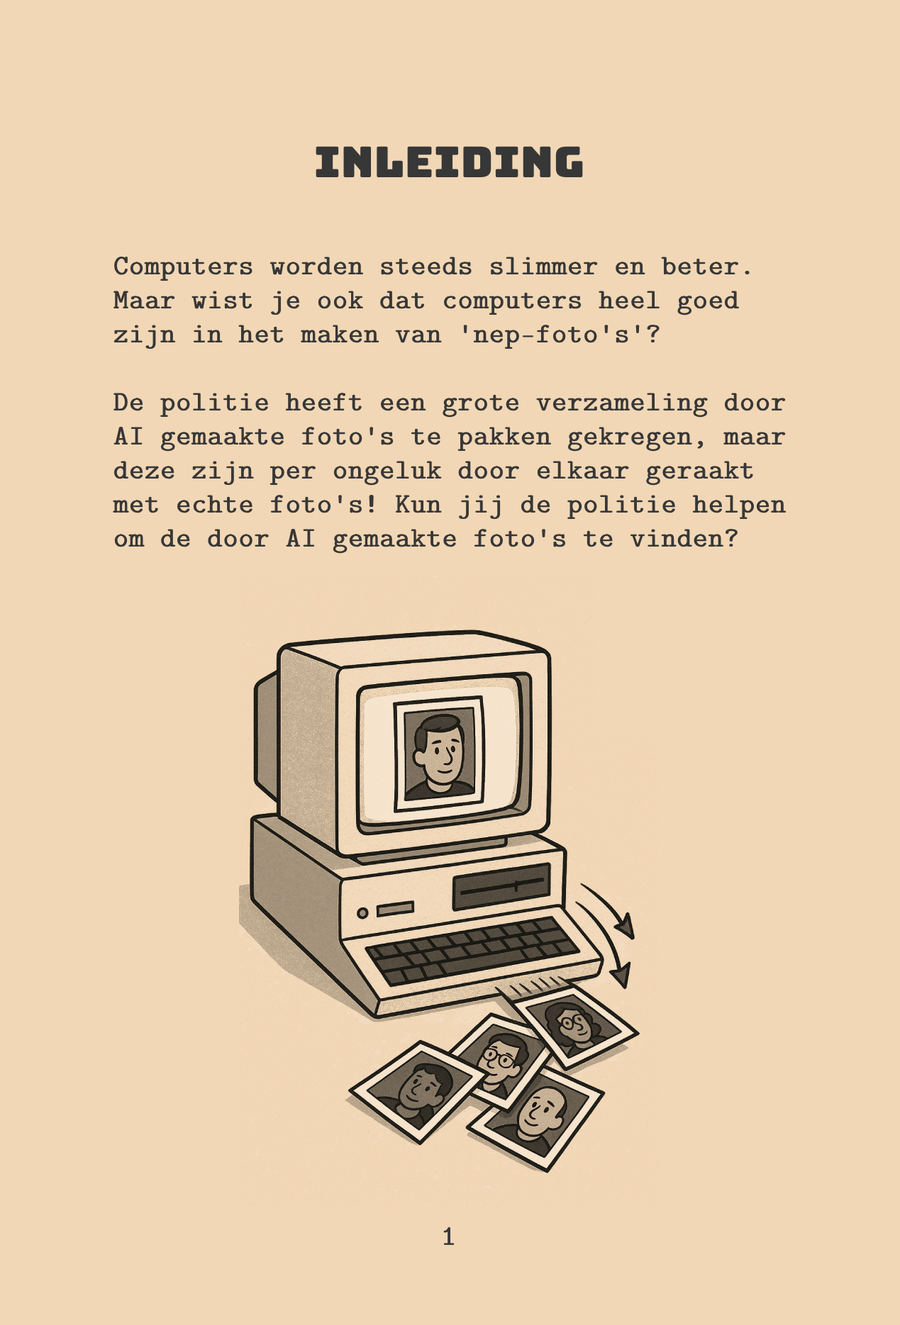
<style>
.page{position:relative;width:900px;height:1325px;background:#f1d7b5}
.page>*{position:absolute;margin:0}
.t1{font:42.5px "Bungee-Regular";color:#373737;font-weight:bold}
.t2{font:28.4px "CMUTypewriter-Regular";color:#373737;font-weight:bold}
</style>
<div class="page">
<p class="t1" style="left:316px;top:146px;width:267px;height:31px">Inleiding</p>
<p class="t2" style="left:113px;top:257px;width:673px;height:297px;text-align:justify">Computers worden steeds slimmer en beter. <br>Maar wist je ook dat computers heel goed <br>zijn in het maken van 'nep-foto's'?<br><br>De politie heeft een grote verzameling door <br>AI gemaakte foto's te pakken gekregen, maar <br>deze zijn per ongeluk door elkaar geraakt <br>met echte foto's! Kun jij de politie helpen <br>om de door AI gemaakte foto's te vinden?</p>
<p class="t2" style="left:443px;top:1227px;width:12px;height:18px">1</p>
</div>
